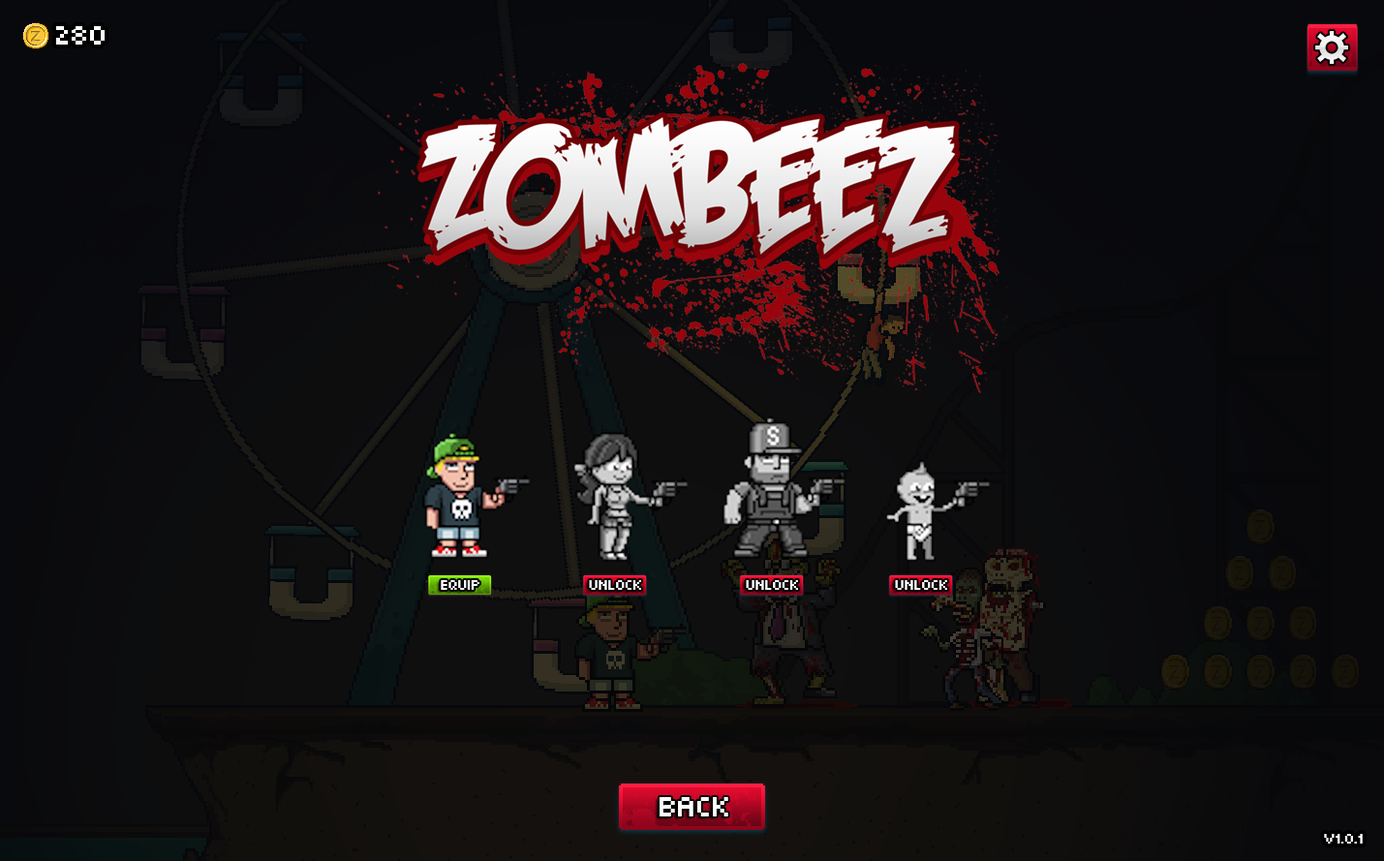
<style>
.page{position:relative;width:1384px;height:861px}
.page>*{position:absolute;margin:0}
.t1{font:36.8px "MunroSmall";color:#ffffff}
.t2{font:19.4px "MunroSmall";color:#ffffff}
.t3{font:38.8px "MunroSmall";color:#ffffff}
</style>
<div class="page">
<p class="t1" style="left:56px;top:26px;width:49px;height:19px">280</p>
<p class="t2" style="left:441px;top:580px;width:39px;height:10px">EQUIP</p>
<p class="t2" style="left:589px;top:580px;width:52px;height:10px">UNLOCK</p>
<p class="t2" style="left:746px;top:580px;width:52px;height:10px">UNLOCK</p>
<p class="t2" style="left:895px;top:580px;width:53px;height:10px">UNLOCK</p>
<p class="t3" style="left:660px;top:797px;width:69px;height:20px">BACK</p>
<p class="t2" style="left:1324px;top:834px;width:39px;height:10px">v1.0.1</p>
</div>
